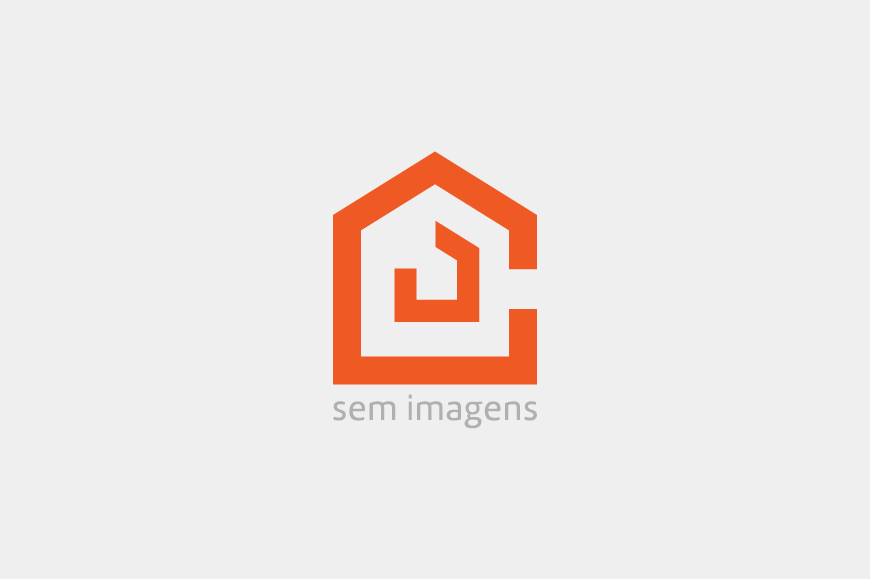
<style>
.page{position:relative;width:870px;height:579px;background:#efefef}
.page>*{position:absolute;margin:0}
.t1{font:36px "Marine-Regular";letter-spacing:0.025em;color:#b0b0b0}
</style>
<div class="page">
<p class="t1" style="left:333px;top:394px;width:204px;height:35px">sem imagens</p>
</div>
